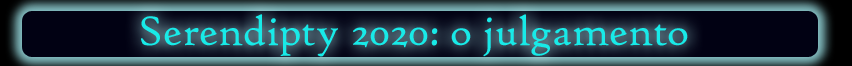
<style>
.page{position:relative;width:852px;height:66px}
.page>*{position:absolute;margin:0}
.t1{font:44px "HighTowerText-Reg";color:#18eae8}
</style>
<div class="page">
<p class="t1" style="left:141px;top:14px;width:547px;height:43px">Serendipty 2020: o julgamento</p>
</div>
